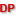
<style>
.page{position:relative;width:16px;height:16px;background:#ffffff}
.page>*{position:absolute;margin:0}
.t1{font:10.7px "Arial-BoldMT";letter-spacing:0.05em;color:#dc0000}
</style>
<div class="page">
<p class="t1" style="left:0px;top:4px;width:7px;height:8px">D</p>
<p class="t1" style="left:8px;top:4px;width:7px;height:8px">P</p>
</div>
